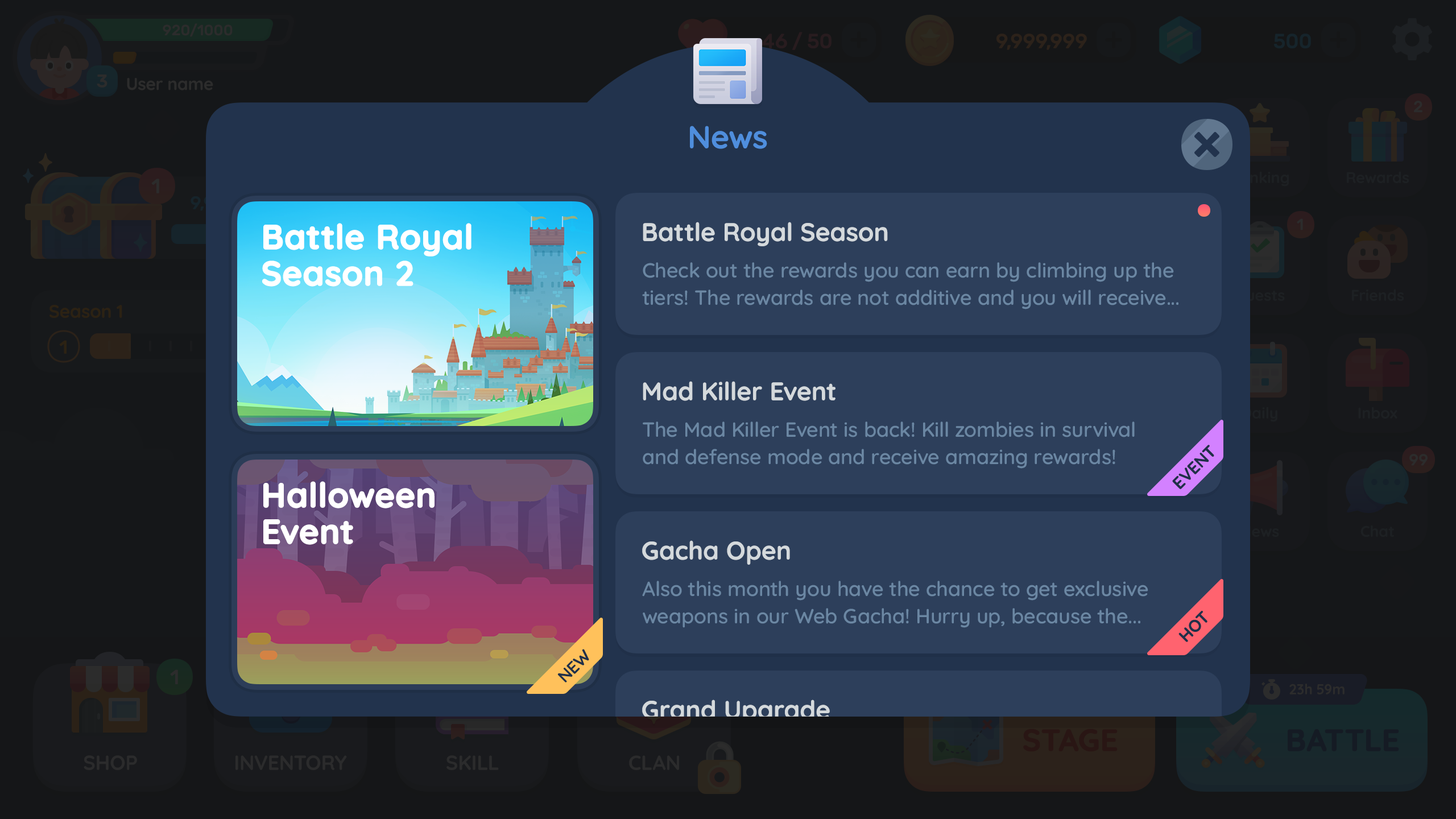
<style>
.page{position:relative;width:1456px;height:819px}
.page>*{position:absolute;margin:0}
.t1{font:31.8px "Quicksand-Bold";color:#4f8edd}
.t2{font:25.5px "Quicksand-Bold";color:#d4d9dc}
.t3{font:34.1px/36.4px "Quicksand-Bold";color:#ffffff;font-weight:bold}
.t4{font:20.5px/27.3px "Quicksand-SemiBold";color:#6b87a3}
.t5{font:17.1px "Quicksand-Bold";color:#203049;text-transform:uppercase}
.t6{font:17.1px "Quicksand-Bold";letter-spacing:-0.01em;color:#203049;text-transform:uppercase}
</style>
<div class="page">
<p class="t1" style="left:690px;top:126px;width:77px;height:23px">News</p>
<p class="t2" style="left:643px;top:222px;width:245px;height:24px">Battle Royal Season</p>
<p class="t3" style="left:262px;top:223px;width:209px;height:64px">Battle Royal <br>Season 2</p>
<p class="t4" style="left:642px;top:262px;width:536px;height:47px">Check out the rewards you can earn by climbing up the<br>tiers! The rewards are not additive and you will receive...</p>
<p class="t2" style="left:643px;top:381px;width:192px;height:20px">Mad Killer Event</p>
<p class="t4" style="left:643px;top:421px;width:492px;height:48px">The Mad Killer Event is back! Kill zombies in survival <br>and defense mode and receive amazing rewards!</p>
<p class="t5" style="left:1172px;top:445px;width:42px;height:44px;rotate:-45deg">Event</p>
<p class="t3" style="left:263px;top:481px;width:172px;height:64px">Halloween<br>Event</p>
<p class="t2" style="left:642px;top:540px;width:148px;height:25px">Gacha Open</p>
<p class="t4" style="left:642px;top:581px;width:506px;height:47px">Also this month you have the chance to get exclusive <br>weapons in our Web Gacha! Hurry up, because the...</p>
<p class="t5" style="left:1178px;top:610px;width:29px;height:32px;rotate:-45deg">HOt</p>
<p class="t6" style="left:557px;top:649px;width:32px;height:33px;rotate:-45deg">New</p>
<p class="t2" style="left:642px;top:700px;width:188px;height:24px">Grand Upgrade</p>
</div>
